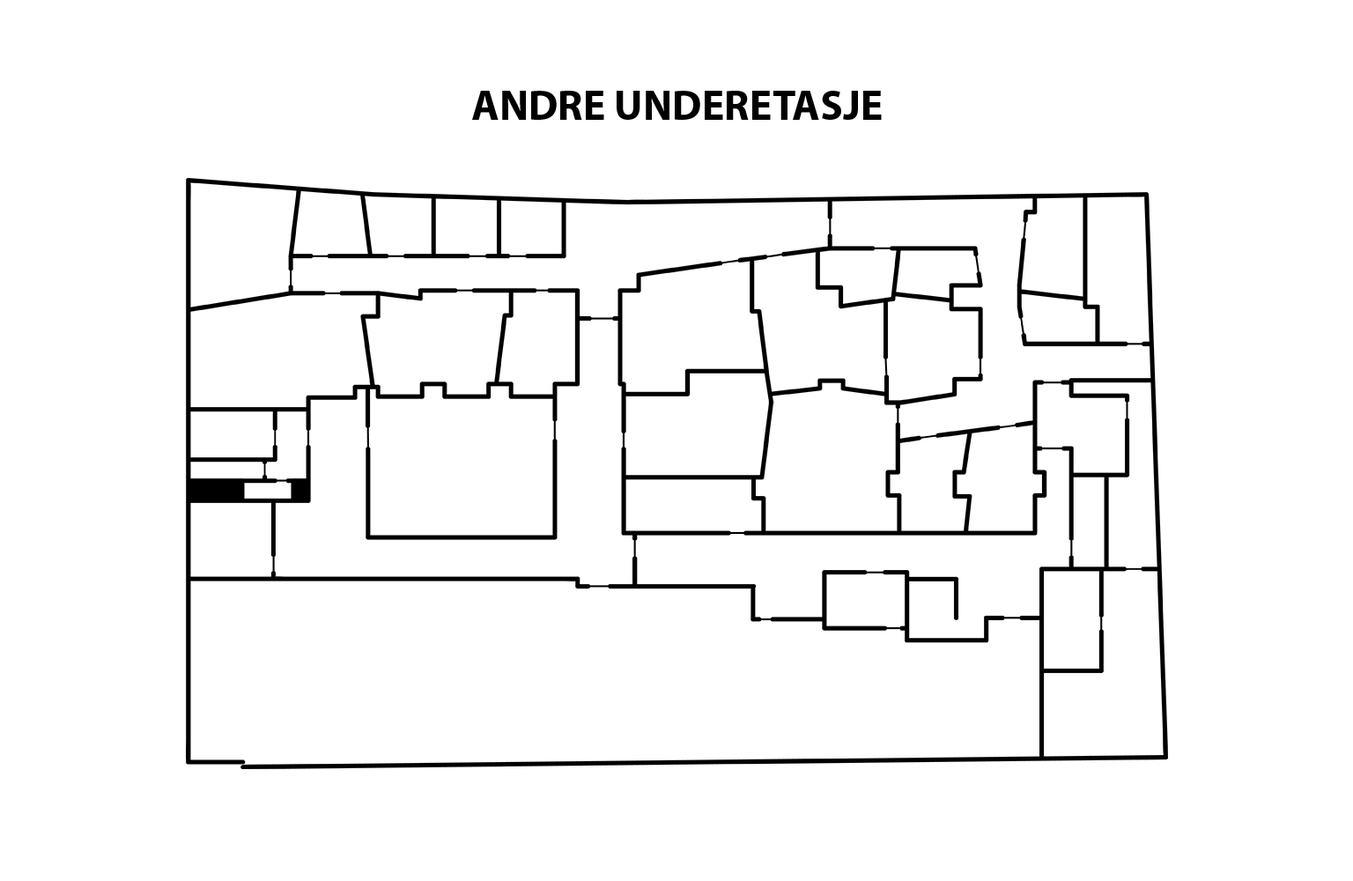
<style>
.page{position:relative;width:1353px;height:881px;background:#ffffff}
.page>*{position:absolute;margin:0}
.t1{font:42.3px "MyriadPro-Bold";color:#000000}
</style>
<div class="page">
<p class="t1" style="left:472px;top:91px;width:410px;height:29px">ANDRE UNDERETASJE</p>
</div>
